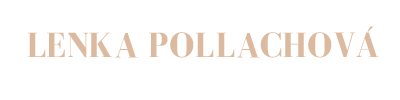
<style>
.page{position:relative;width:400px;height:100px;background:#ffffff}
.page>*{position:absolute;margin:0}
.t1{font:36px "BodoniFLF-Bold";color:#dcba9f}
</style>
<div class="page">
<p class="t1" style="left:27px;top:26px;width:352px;height:32px">LENKA POLLACHOVÁ</p>
</div>
